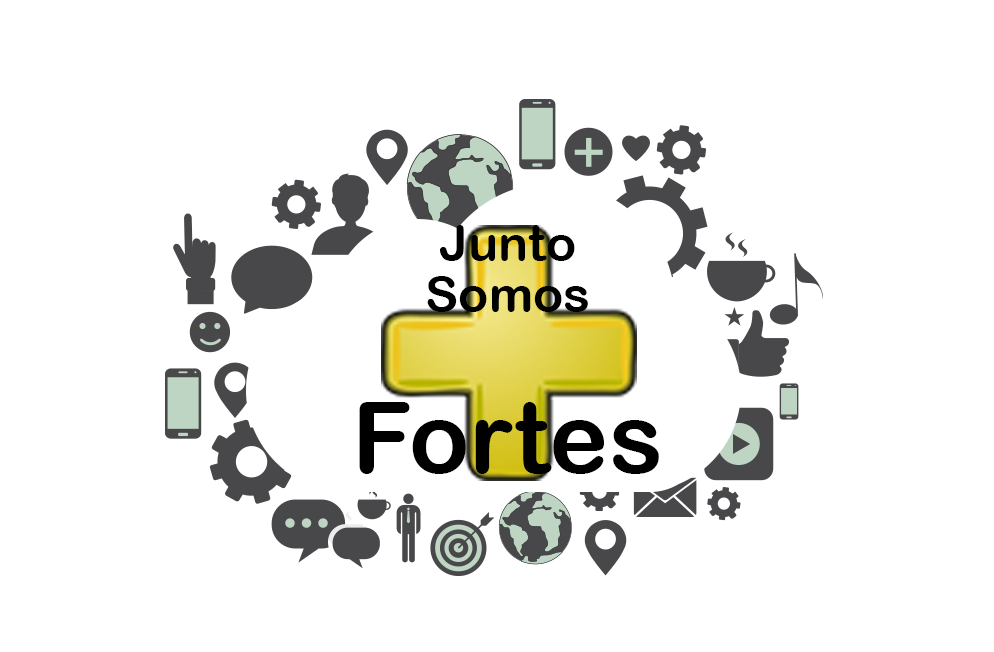
<style>
.page{position:relative;width:994px;height:652px;background:#ffffff}
.page>*{position:absolute;margin:0}
.t1{font:50px "ArialRoundedMTBold";color:#000000}
.t2{font:100px "ArialRoundedMTBold";color:#000000}
</style>
<div class="page">
<p class="t1" style="left:439px;top:225px;width:136px;height:36px">Junto</p>
<p class="t1" style="left:427px;top:276px;width:161px;height:36px">Somos</p>
<p class="t2" style="left:359px;top:402px;width:300px;height:72px">Fortes</p>
</div>
